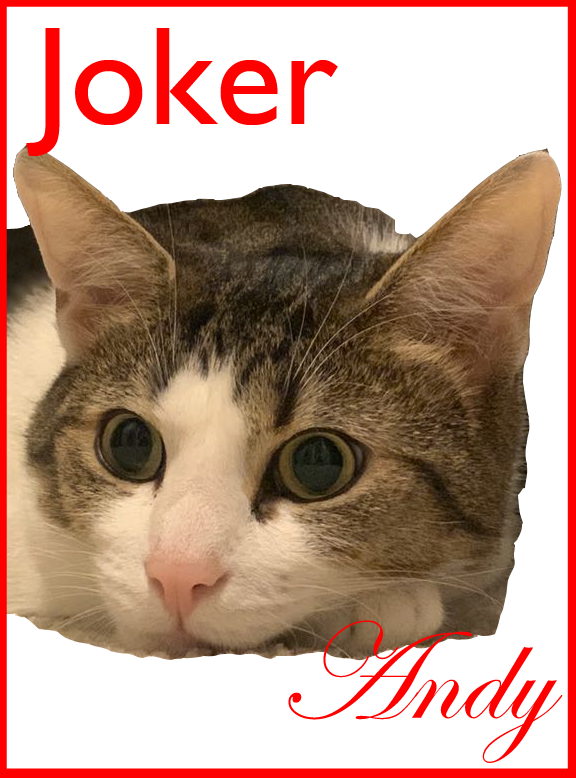
<style>
.page{position:relative;width:576px;height:778px;background:#ffffff}
.page>*{position:absolute;margin:0}
.t1{font:140px "GillSansMT";color:#ff0000}
.t2{font:140px "EdwardianScriptITC";color:#ff0000}
</style>
<div class="page">
<p class="t1" style="left:26px;top:28px;width:312px;height:128px">Joker</p>
<p class="t2" style="left:288px;top:620px;width:275px;height:143px">Andy</p>
</div>
